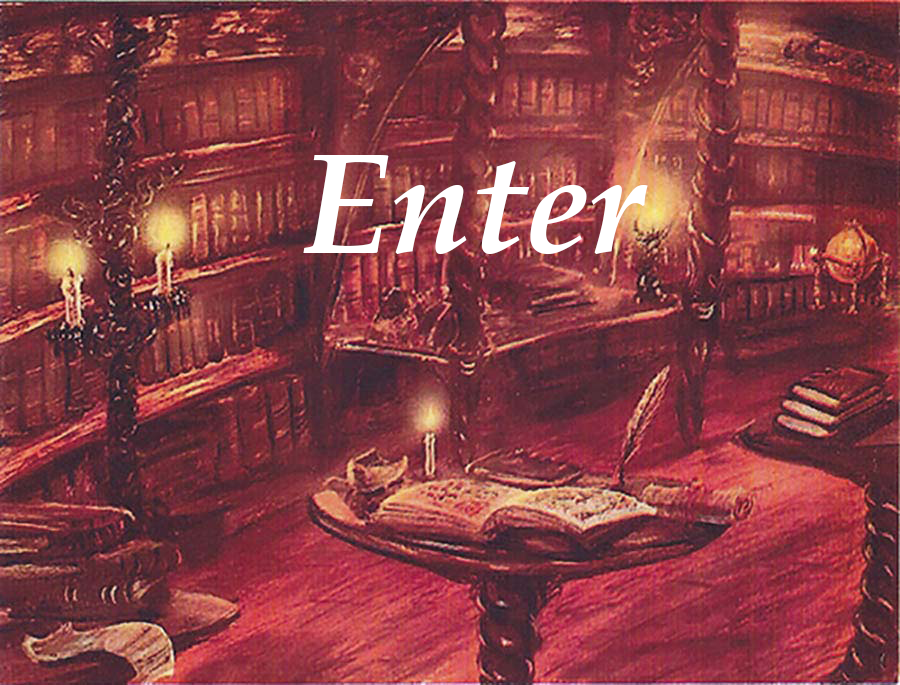
<style>
.page{position:relative;width:900px;height:685px}
.page>*{position:absolute;margin:0}
.t1{font:141.7px "BookAntiqua-BoldItalic";color:#ffffff}
</style>
<div class="page">
<p class="t1" style="left:303px;top:155px;width:345px;height:99px">Enter</p>
</div>
